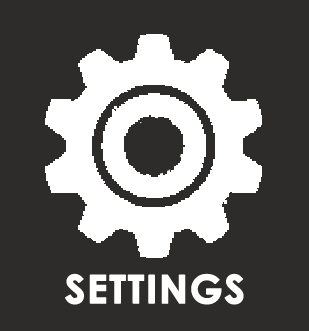
<style>
.page{position:relative;width:309px;height:331px;background:#2e2c2b}
.page>*{position:absolute;margin:0}
.t1{font:38.9px "CenturyGothic-Bold";letter-spacing:0.025em;color:#ffffff;font-weight:bold}
</style>
<div class="page">
<p class="t1" style="left:65px;top:273px;width:179px;height:32px">SETTINGS</p>
</div>
